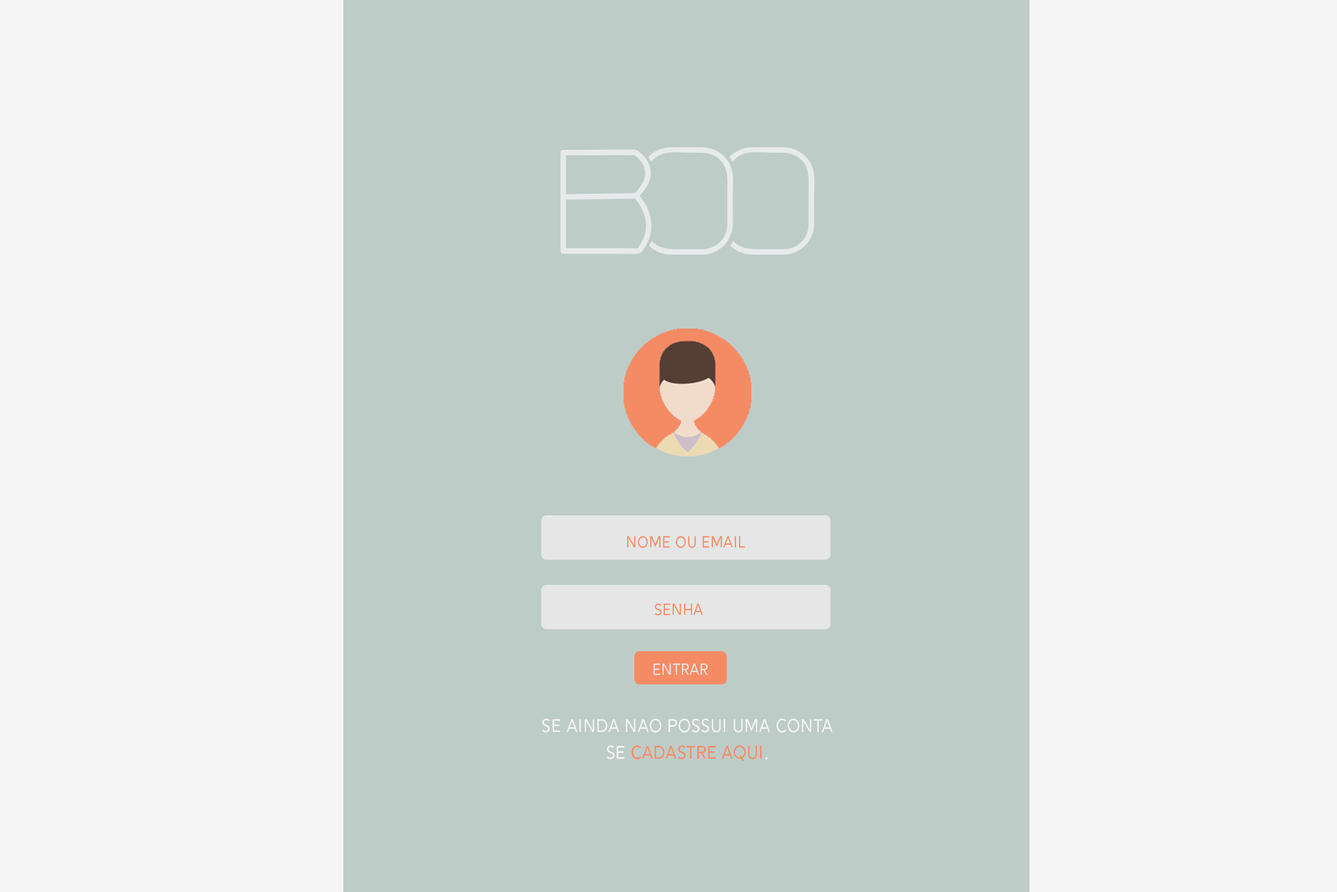
<style>
.page{position:relative;width:1337px;height:892px;background:#f5f5f5}
.page>*{position:absolute;margin:0}
.t1{font:19.3px "Alesand-Regular";color:#f58b65}
.t2{font:19.3px "Alesand-Regular";color:#e6e6e6}
.t3{font:22.3px "Alesand-Regular";color:#f5f5f5}
.t4{font:22.3px "Alesand-Regular";color:#f58b65}
</style>
<div class="page">
<p class="t1" style="left:627px;top:536px;width:118px;height:12px">NOME OU EMAIL</p>
<p class="t1" style="left:655px;top:603px;width:48px;height:12px">SENHA</p>
<p class="t2" style="left:654px;top:663px;width:54px;height:12px">ENTRAR</p>
<p class="t3" style="left:542px;top:718px;width:291px;height:43px;text-align:center">SE AINDA NAO POSSUI UMA CONTA<br>SE <span class="t4">CADASTRE AQUI</span>.</p>
</div>
